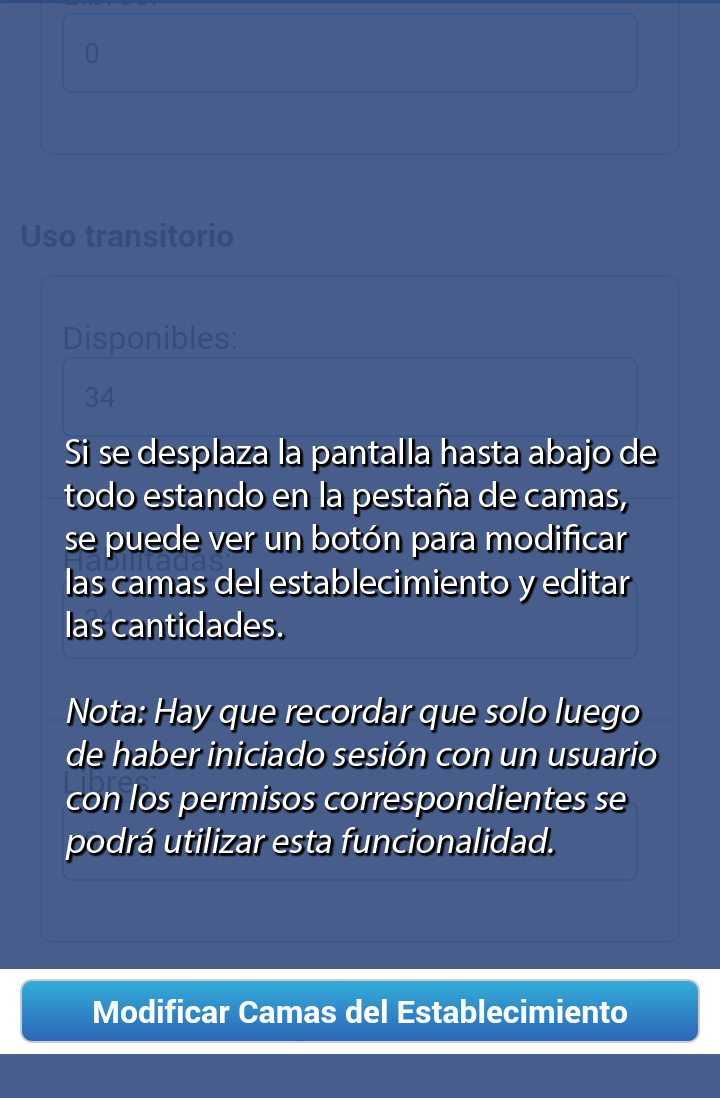
<style>
.page{position:relative;width:720px;height:1098px;background:#475e8c}
.page>*{position:absolute;margin:0}
.t1{font:36px "MyriadPro-Regular";color:#ffffff}
.t2{font:36px "MyriadPro-Regular";color:#ffffff;font-style:italic}
</style>
<div class="page">
<p class="t1" style="left:64px;top:438px;width:593px;height:422px">Si se desplaza la pantalla hasta abajo de<br>todo estando en la pestaña de camas,<br>se puede ver un botón para modificar <br>las camas del establecimiento y editar<br>las cantidades.<br><br><span class="t2">Nota: Hay que recordar que solo luego<br>de haber iniciado sesión con un usuario<br>con los permisos correspondientes se<br>podrá utilizar esta funcionalidad.</span></p>
</div>
